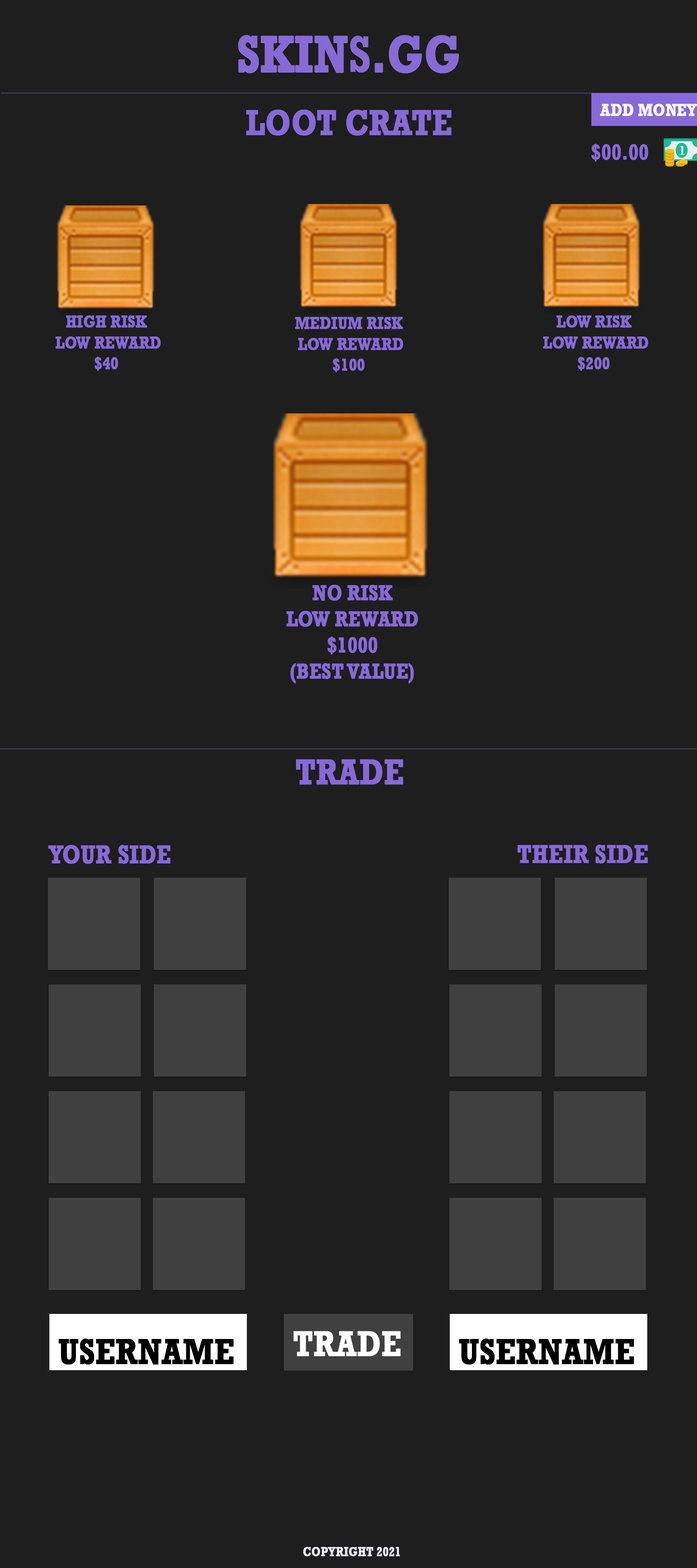
<style>
.page{position:relative;width:697px;height:1568px;background:#1e1e1e}
.page>*{position:absolute;margin:0}
.t1{font:52.3px "Rockwell-Bold";color:#8769d8;text-transform:uppercase;font-weight:bold;scale:0.81 1}
.t2{font:36.3px "Rockwell-Bold";color:#8769d8;text-transform:uppercase;font-weight:bold;scale:0.81 1}
.t3{font:17.4px "Rockwell-Bold";color:#8769d8;text-transform:uppercase;font-weight:bold;scale:0.81 1}
.t4{font:21.8px "Rockwell-Bold";color:#8769d8;text-transform:uppercase;font-weight:bold;scale:0.81 1}
.t5{font:26.1px "Rockwell-Bold";color:#8769d8;text-transform:uppercase;font-weight:bold;scale:0.81 1}
.t6{font:13.1px "Rockwell-Bold";color:#f1ecff;text-transform:uppercase;font-weight:bold;scale:0.81 1}
</style>
<div class="page">
<p class="t1" style="left:238px;top:35px;width:221px;height:38px">SKINS.GG</p>
<p class="t2" style="left:246px;top:110px;width:206px;height:26px">loot CRATE</p>
<p class="t3" style="left:56px;top:315px;width:105px;height:56px;text-align:center">High Risk <br>Low Reward<br>$40</p>
<p class="t3" style="left:295px;top:317px;width:108px;height:55px;text-align:center">MEdium Risk <br>Low Reward<br>$100</p>
<p class="t3" style="left:543px;top:315px;width:105px;height:56px;text-align:center">Low Risk <br>Low Reward<br>$200</p>
<p class="t4" style="left:286px;top:585px;width:132px;height:98px;text-align:center">no risk<br>low reward<br>$1000<br>(BEST VALUE)</p>
<p class="t2" style="left:296px;top:759px;width:107px;height:26px">TRADE</p>
<p class="t5" style="left:48px;top:845px;width:123px;height:19px">YOUR SIDE</p>
<p class="t5" style="left:517px;top:845px;width:131px;height:18px">Their SIDE</p>
<p class="t6" style="left:303px;top:1547px;width:97px;height:9px">Copyright 2021</p>
</div>
